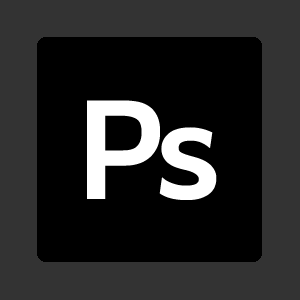
<style>
.page{position:relative;width:300px;height:300px;background:#000000}
.page>*{position:absolute;margin:0}
.t1{font:135.5px "Cabin-Regular";letter-spacing:-0.05em;color:#ffffff;font-weight:bold;scale:1.09 1}
</style>
<div class="page">
<p class="t1" style="left:87px;top:100px;width:130px;height:100px">Ps</p>
</div>
